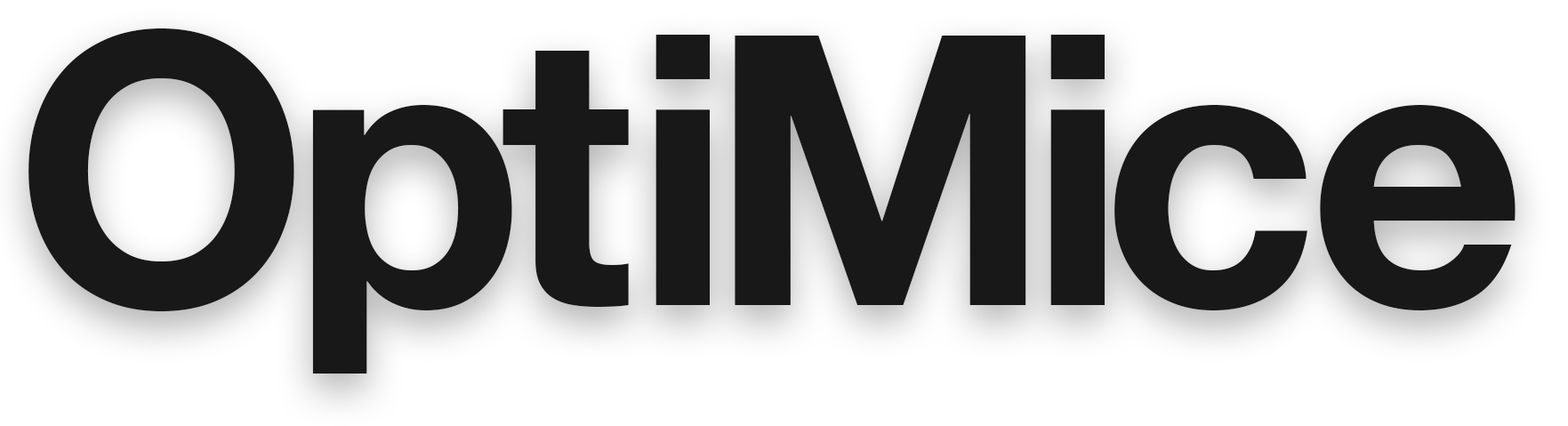
<style>
.page{position:relative;width:1568px;height:426px;background:#ffffff}
.page>*{position:absolute;margin:0}
.t1{font:377.9px "HelveticaNeue-Bold";color:#181818}
</style>
<div class="page">
<p class="t1" style="left:28px;top:28px;width:1488px;height:346px">OptiMice</p>
</div>
